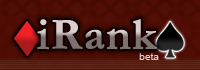
<style>
.page{position:relative;width:200px;height:70px}
.page>*{position:absolute;margin:0}
.t1{font:44.9px "Garamond-Bold";font-weight:bold}
.t2{font:10px "ArialMT";color:#e0d3d1}
</style>
<div class="page">
<p class="t1" style="left:37px;top:19px;width:120px;height:31px">iRank</p>
<p class="t2" style="left:139px;top:53px;width:20px;height:7px">beta</p>
</div>
